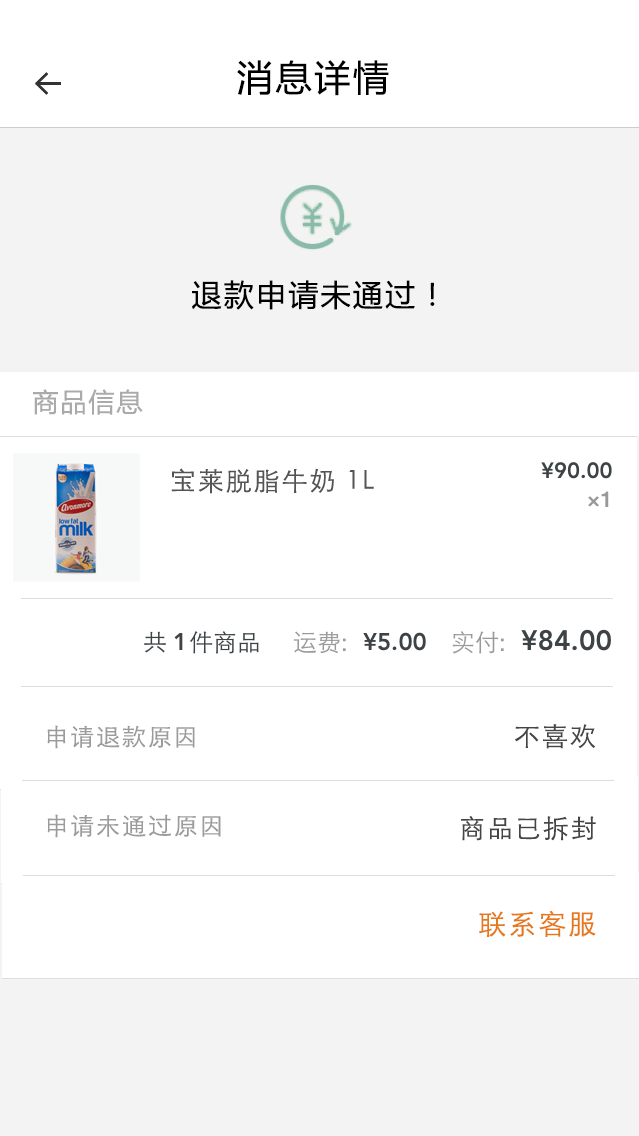
<style>
.page{position:relative;width:639px;height:1136px;background:#ffffff}
.page>*{position:absolute;margin:0}
.t1{font:36px "MicrosoftYaHei";letter-spacing:0.075em;color:#000000}
.t2{font:30px "MicrosoftYaHei";letter-spacing:0.075em;color:#010101}
.t3{font:26px "MicrosoftYaHei";letter-spacing:0.075em;color:#abaaaa}
.t4{font:26px "STXihei";letter-spacing:0.075em;color:#545454}
.t5{font:24px "STXihei";letter-spacing:0.075em;color:#9b9b9b}
.t6{font:26px "STXihei";letter-spacing:0.075em;color:#454545}
.t7{font:28px "STXihei";letter-spacing:0.075em;color:#e77817}
</style>
<div class="page">
<p class="t1" style="left:237px;top:60px;width:152px;height:36px">消息详情</p>
<p class="t2" style="left:191px;top:280px;width:244px;height:30px">退款申请未通过！</p>
<p class="t3" style="left:33px;top:389px;width:110px;height:26px">商品信息</p>
<p class="t4" style="left:171px;top:468px;width:203px;height:26px">宝莱脱脂牛奶 1L</p>
<p class="t5" style="left:47px;top:725px;width:148px;height:24px">申请退款原因</p>
<p class="t6" style="left:515px;top:724px;width:80px;height:25px">不喜欢</p>
<p class="t5" style="left:47px;top:814px;width:174px;height:24px">申请未通过原因</p>
<p class="t6" style="left:461px;top:816px;width:135px;height:25px">商品已拆封</p>
<p class="t7" style="left:479px;top:910px;width:117px;height:27px">联系客服</p>
</div>
